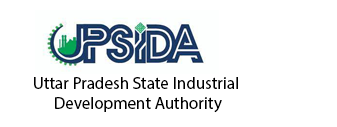
<style>
.page{position:relative;width:337px;height:127px;background:#ffffff}
.page>*{position:absolute;margin:0}
.t1{font:17px "MyriadPro-Regular";color:#000000}
</style>
<div class="page">
<p class="t1" style="left:34px;top:77px;width:204px;height:36px;text-align:center">Uttar Pradesh State Industrial<br> Development Authority</p>
</div>
